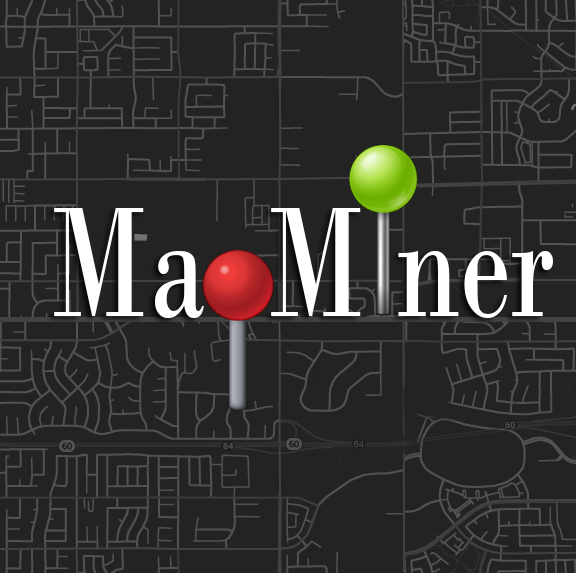
<style>
.page{position:relative;width:576px;height:573px;background:#232323}
.page>*{position:absolute;margin:0}
.t1{font:165px "BodoniMT";color:#ffffff;scale:0.72 1}
</style>
<div class="page">
<p class="t1" style="left:54px;top:208px;width:499px;height:110px">Ma  M ner</p>
</div>
